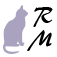
<style>
.page{position:relative;width:57px;height:57px;background:#ffffff}
.page>*{position:absolute;margin:0}
.t1{font:24px "ARBERKLEY";color:#000000}
</style>
<div class="page">
<p class="t1" style="left:33px;top:7px;width:20px;height:20px">R</p>
<p class="t1" style="left:27px;top:30px;width:25px;height:21px">M</p>
</div>
